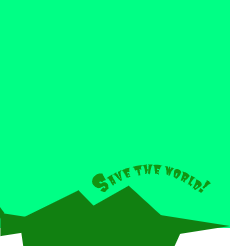
<style>
.page{position:relative;width:230px;height:246px;background:#00ff85}
.page>*{position:absolute;margin:0}
.t1{font:12px "Butcherman-Regular";color:#129412}
.t2{font:24px "Butcherman-Regular";color:#129412}
</style>
<div class="page">
<p class="t1" style="left:92px;top:164px;width:119px;height:29px"><span class="t2">s</span>ave the world!</p>
</div>
